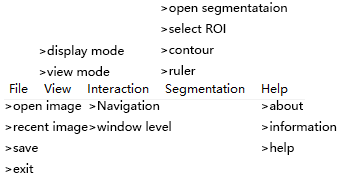
<style>
.page{position:relative;width:342px;height:179px;background:#ffffff}
.page>*{position:absolute;margin:0}
.t1{font:12px "MicrosoftYaHeiUI";color:#000000}
</style>
<div class="page">
<p class="t1" style="left:161px;top:2px;width:126px;height:73px">&gt;open segmentataion<br>&gt;select ROI<br>&gt;contour<br>&gt;ruler</p>
<p class="t1" style="left:39px;top:45px;width:85px;height:31px">&gt;display mode<br>&gt;view mode</p>
<p class="t1" style="left:5px;top:100px;width:83px;height:73px">&gt;open image<br>&gt;recent image<br>&gt;save <br>&gt;exit</p>
<p class="t1" style="left:89px;top:100px;width:82px;height:31px">&gt;Navigation<br>&gt;window level</p>
<p class="t1" style="left:262px;top:100px;width:75px;height:55px">&gt;about <br>&gt;information<br>&gt;help</p>
</div>
